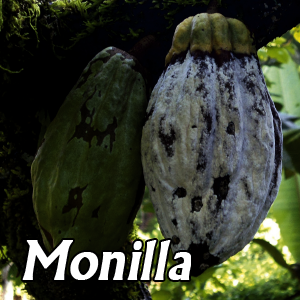
<style>
.page{position:relative;width:300px;height:300px}
.page>*{position:absolute;margin:0}
.t1{font:55.6px "Narkisim";color:#ffffff;font-weight:bold;font-style:italic}
</style>
<div class="page">
<p class="t1" style="left:22px;top:240px;width:169px;height:40px">Monilla</p>
</div>
